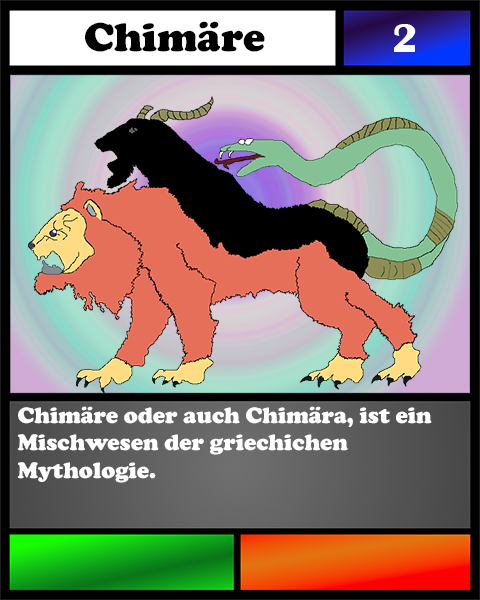
<style>
.page{position:relative;width:480px;height:600px}
.page>*{position:absolute;margin:0}
.t1{font:41.7px "CooperBlack";color:#000000}
.t2{font:41.7px "BritannicBold";color:#ffffff}
.t3{font:23.1px "CooperBlack";color:#ffffff}
</style>
<div class="page">
<p class="t1" style="left:85px;top:21px;width:180px;height:31px">Chimäre</p>
<p class="t2" style="left:394px;top:24px;width:22px;height:28px">2</p>
<p class="t3" style="left:17px;top:406px;width:415px;height:77px">Chimäre oder auch Chimära, ist ein Mischwesen der griechichen Mythologie.</p>
</div>
